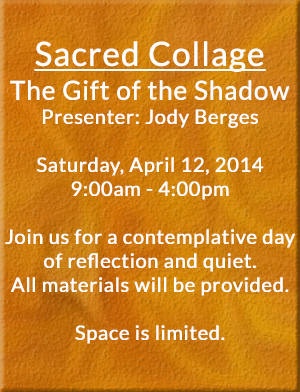
<style>
.page{position:relative;width:300px;height:392px}
.page>*{position:absolute;margin:0}
.t1{font:20px/24px "Lato-Regular";letter-spacing:0.01em;color:#ffffff;font-weight:bold}
.t2{font:33px/48px "Lato-Regular";letter-spacing:0.01em;color:#ffffff;font-weight:bold;text-decoration:underline}
.t3{font:26px/28px "Lato-Regular";letter-spacing:0.01em;color:#ffffff;font-weight:bold}
</style>
<div class="page">
<p class="t1" style="left:5px;top:41px;width:290px;height:303px;text-align:center"><span class="t2">Sacred Collage<br><br></span><span class="t3">The Gift of the Shadow<br></span>Presenter: Jody Berges<br><br>Saturday, April 12, 2014<br>9:00am - 4:00pm<br><br>Join us for a contemplative day of reflection and quiet.<br>All materials will be provided.<br><br>Space is limited.</p>
</div>
